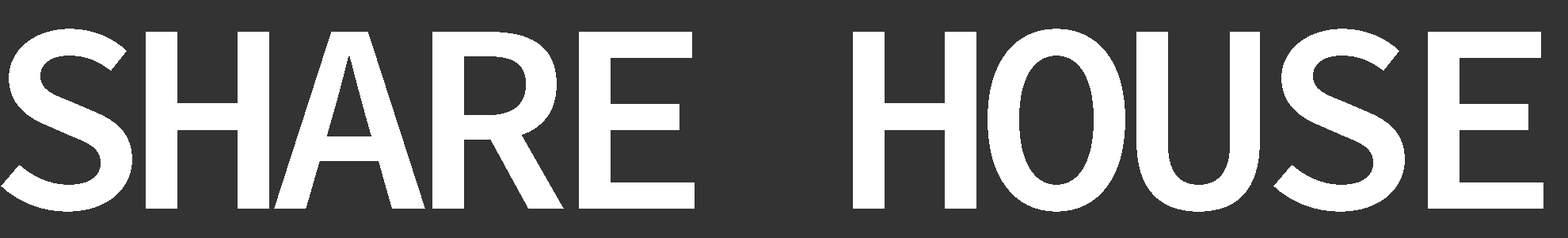
<style>
.page{position:relative;width:1568px;height:238px;background:#333333}
.page>*{position:absolute;margin:0}
.t1{font:269.4px "SourceCodePro-Semibold";letter-spacing:-0.075em;color:#ffffff}
</style>
<div class="page">
<p class="t1" style="left:1px;top:29px;width:1542px;height:182px">SHARE HOUSE</p>
</div>
